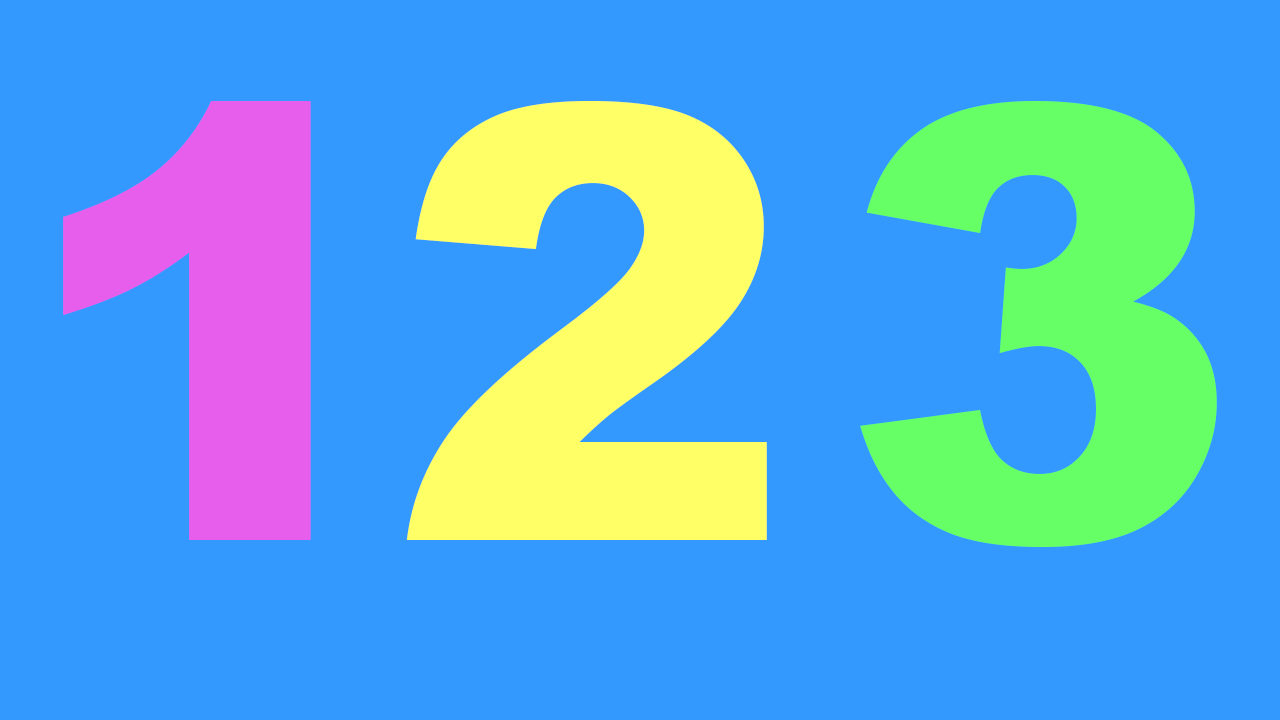
<style>
.page{position:relative;width:1280px;height:720px;background:#3399ff}
.page>*{position:absolute;margin:0}
.t1{font:602.9px "Arial-Black";color:#e75dec}
.t2{font:602.9px "Arial-Black";color:#ffff66}
.t3{font:602.9px "Arial-Black";color:#66ff66}
</style>
<div class="page">
<p class="t1" style="left:63px;top:101px;width:248px;height:439px">1</p>
<p class="t2" style="left:406px;top:101px;width:361px;height:439px">2</p>
<p class="t3" style="left:860px;top:101px;width:357px;height:446px">3</p>
</div>
